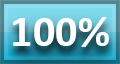
<style>
.page{position:relative;width:120px;height:64px}
.page>*{position:absolute;margin:0}
.t1{font:44.4px "Calibri-Bold";color:#ffffff}
</style>
<div class="page">
<p class="t1" style="left:13px;top:17px;width:96px;height:30px">100%</p>
</div>
